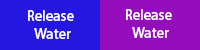
<style>
.page{position:relative;width:200px;height:50px;background:#2517df}
.page>*{position:absolute;margin:0}
.t1{font:15px "MyriadHebrew-Regular";color:#ffffff}
.t2{font:15px "MyriadHebrew-Regular"}
</style>
<div class="page">
<p class="t1" style="left:28px;top:10px;width:46px;height:29px">Release<br> Water</p>
<p class="t1" style="left:126px;top:9px;width:46px;height:29px">Release<br> Water</p>
<p class="t2" style="left:134px;top:9px;width:32px;height:32px">Erase <br>Pipes</p>
</div>
